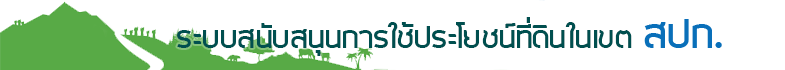
<style>
.page{position:relative;width:785px;height:70px;background:#ffffff}
.page>*{position:absolute;margin:0}
.t1{font:36px "SuperspaceBold";letter-spacing:-0.025em;color:#004f4f}
.t2{font:48px "SuperspaceBold";letter-spacing:-0.025em;color:#096fb9}
</style>
<div class="page">
<p class="t1" style="left:177px;top:17px;width:455px;height:39px">ระบบสนับสนุนการใช้ประโยชน์ที่ดินในเขต</p>
<p class="t2" style="left:644px;top:19px;width:78px;height:29px">สปก.</p>
</div>
